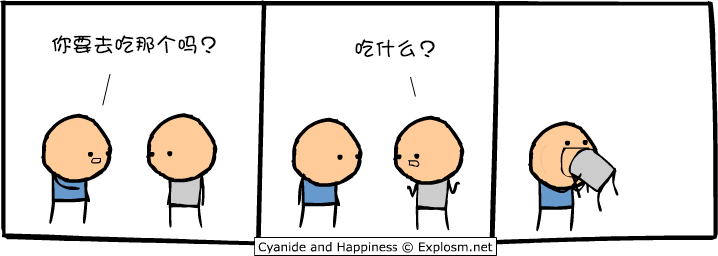
<style>
.page{position:relative;width:718px;height:256px;background:#ffffff}
.page>*{position:absolute;margin:0}
.t1{font:21px "DFGirl";color:#000000}
</style>
<div class="page">
<p class="t1" style="left:52px;top:35px;width:164px;height:19px">你要去吃那个吗？</p>
<p class="t1" style="left:355px;top:39px;width:80px;height:19px">吃什么？</p>
</div>
